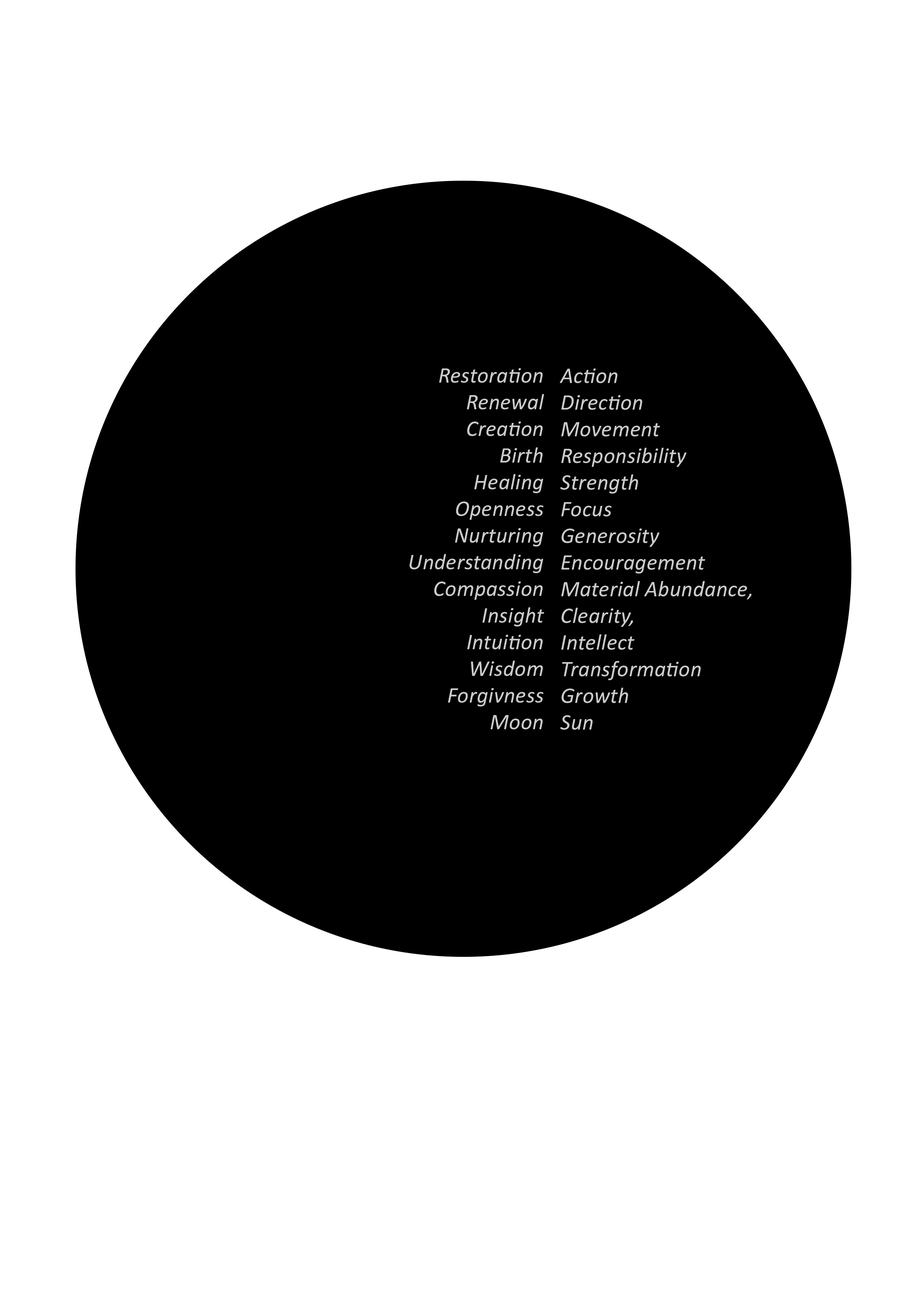
<style>
.page{position:relative;width:918px;height:1299px;background:#ffffff}
.page>*{position:absolute;margin:0}
.t1{font:22.2px "Calibri-Italic";letter-spacing:0.01em;color:#cccccc}
</style>
<div class="page">
<p class="t1" style="left:409px;top:368px;width:135px;height:361px;text-align:right">Restoration<br>Renewal<br>Creation<br>Birth<br>Healing<br>Openness<br>Nurturing<br>Understanding<br>Compassion<br>Insight<br>Intuition<br>Wisdom<br>Forgivness<br>Moon</p>
<p class="t1" style="left:560px;top:368px;width:192px;height:362px">Action<br>Direction<br>Movement<br>Responsibility<br>Strength<br>Focus<br>Generosity<br>Encouragement<br>Material Abundance,<br>Clearity,<br>Intellect<br>Transformation<br>Growth<br>Sun</p>
</div>
